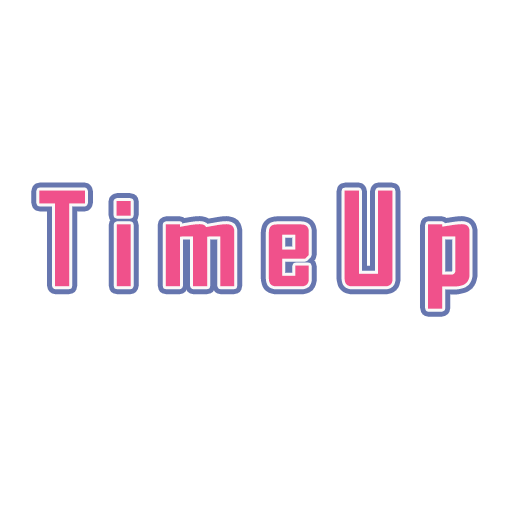
<style>
.page{position:relative;width:512px;height:512px;background:#ffffff}
.page>*{position:absolute;margin:0}
.t1{font:125px "AgencyFB-Bold";letter-spacing:0.2em;color:#f0518b}
</style>
<div class="page">
<p class="t1" style="left:39px;top:190px;width:431px;height:119px">TimeUp</p>
</div>
